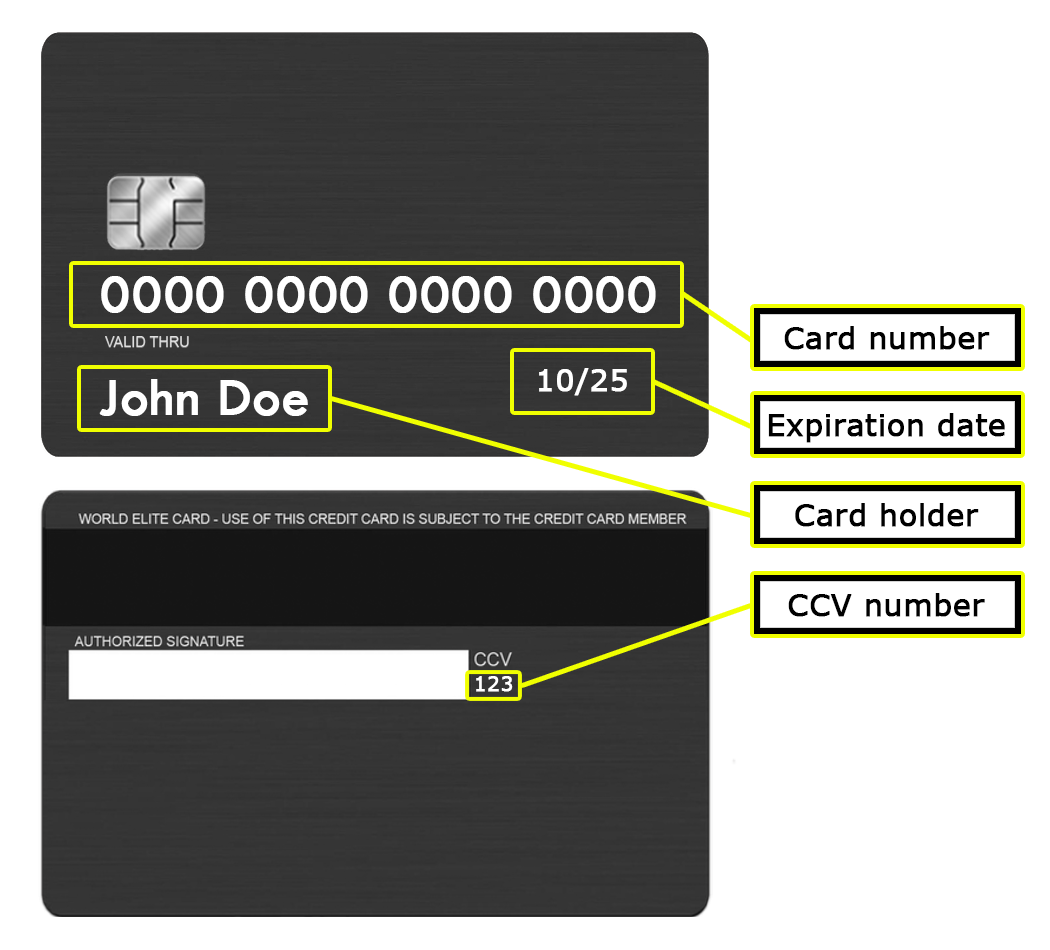
<style>
.page{position:relative;width:1050px;height:950px;background:#ffffff}
.page>*{position:absolute;margin:0}
.t1{font:55px "TwCenMT-Regular";color:#ffffff;font-weight:bold}
.t2{font:30px "Verdana";color:#000000;font-weight:bold}
.t3{font:30px "Verdana";color:#ffffff;font-weight:bold}
.t4{font:20px "Verdana";color:#ffffff;font-weight:bold}
</style>
<div class="page">
<p class="t1" style="left:101px;top:276px;width:555px;height:37px">0000 0000 0000 0000</p>
<p class="t2" style="left:784px;top:326px;width:206px;height:24px">Card number</p>
<p class="t3" style="left:539px;top:368px;width:88px;height:28px">10/25</p>
<p class="t1" style="left:99px;top:379px;width:209px;height:37px">John Doe</p>
<p class="t2" style="left:768px;top:413px;width:237px;height:30px">Expiration date</p>
<p class="t2" style="left:795px;top:503px;width:184px;height:24px">Card holder</p>
<p class="t2" style="left:788px;top:593px;width:197px;height:24px">CCV number</p>
<p class="t4" style="left:476px;top:676px;width:37px;height:16px">123</p>
</div>
